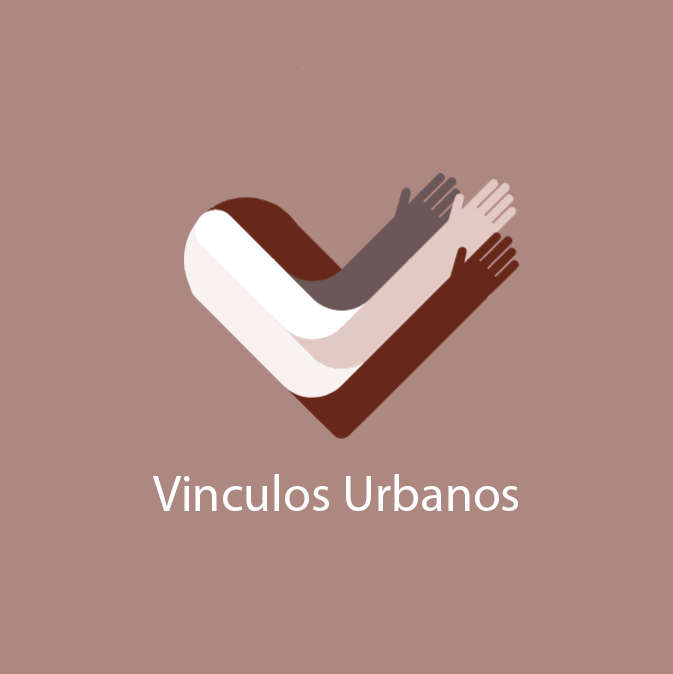
<style>
.page{position:relative;width:673px;height:674px;background:#ad8880}
.page>*{position:absolute;margin:0}
.t1{font:50.7px "MyriadHebrew-Regular";color:#ffffff}
</style>
<div class="page">
<p class="t1" style="left:153px;top:474px;width:365px;height:37px">Vinculos Urbanos</p>
</div>
